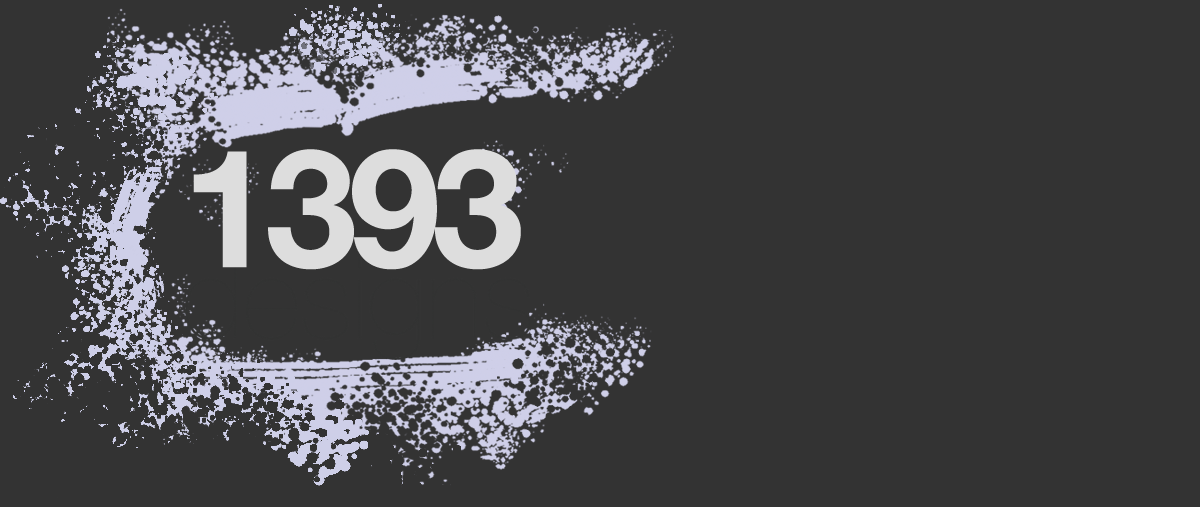
<style>
.page{position:relative;width:1200px;height:507px;background:#333333}
.page>*{position:absolute;margin:0}
.t1{font:164.9px "HelveticaNeue-Bold";letter-spacing:-0.05em;color:#dddddd}
</style>
<div class="page">
<p class="t1" style="left:193px;top:149px;width:328px;height:121px">1393</p>
</div>
